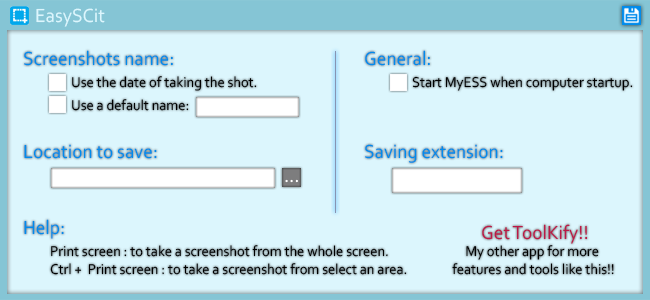
<style>
.page{position:relative;width:650px;height:300px;background:#dcf6fd}
.page>*{position:absolute;margin:0}
.t1{font:20px "Corbel";color:#dcf6fd;scale:0.96 1}
.t2{font:20px "Corbel";color:#008bec;scale:0.96 1}
.t3{font:15px "Corbel";color:#000000;scale:0.96 1}
.t4{font:20px "Corbel";color:#ffffff;scale:0.96 1}
.t5{font:20px "Corbel";color:#bc1847;scale:0.96 1}
</style>
<div class="page">
<p class="t1" style="left:36px;top:8px;width:69px;height:19px">EasySCit</p>
<p class="t2" style="left:24px;top:50px;width:149px;height:16px">Screenshots name:</p>
<p class="t2" style="left:365px;top:50px;width:65px;height:16px">General:</p>
<p class="t3" style="left:72px;top:76px;width:185px;height:15px">Use the date of taking the shot.</p>
<p class="t3" style="left:412px;top:76px;width:221px;height:15px">Start MyESS when computer startup.</p>
<p class="t3" style="left:72px;top:99px;width:117px;height:12px">Use a default name:</p>
<p class="t2" style="left:24px;top:144px;width:133px;height:15px">Location to save:</p>
<p class="t2" style="left:365px;top:144px;width:138px;height:19px">Saving extension:</p>
<p class="t4" style="left:285px;top:179px;width:13px;height:4px">...</p>
<p class="t2" style="left:24px;top:219px;width:40px;height:20px">Help:</p>
<p class="t5" style="left:482px;top:224px;width:106px;height:20px">Get ToolKify!!</p>
<p class="t3" style="left:50px;top:245px;width:357px;height:30px;text-align:right">Print screen : to take a screenshot from the whole screen.<br>Ctrl +  Print screen : to take a screenshot from select an area.</p>
<p class="t3" style="left:452px;top:245px;width:162px;height:30px;text-align:center">My other app for more<br> features and tools like this!!</p>
</div>
